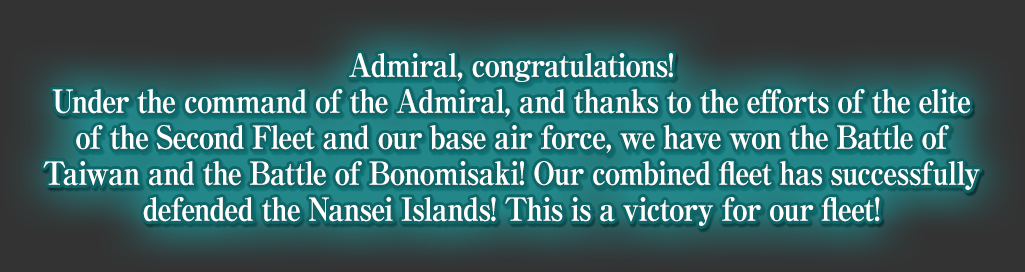
<style>
.page{position:relative;width:1025px;height:272px}
.page>*{position:absolute;margin:0}
.t1{font:32px/36px "RyuminPro-ExBold";letter-spacing:-0.04em;color:#ffffff;scale:0.9 1}
</style>
<div class="page">
<p class="t1" style="left:43px;top:53px;width:937px;height:173px;text-align:center">Admiral, congratulations!<br>Under the command of the Admiral, and thanks to the efforts of the elite<br>of the Second Fleet and our base air force, we have won the Battle of<br>Taiwan and the Battle of Bonomisaki! Our combined fleet has successfully<br>defended the Nansei Islands! This is a victory for our fleet!</p>
</div>
